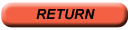
<style>
.page{position:relative;width:130px;height:30px;background:#f46043}
.page>*{position:absolute;margin:0}
.t1{font:14px "Arial-BoldItalicMT";color:#040404}
</style>
<div class="page">
<p class="t1" style="left:36px;top:9px;width:59px;height:11px">RETURN</p>
</div>
